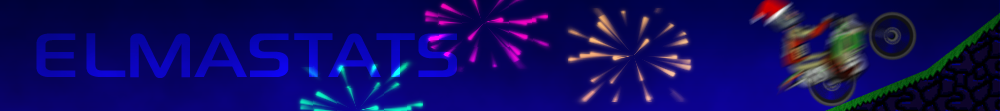
<style>
.page{position:relative;width:1000px;height:111px}
.page>*{position:absolute;margin:0}
.t1{font:89px "SonySketchEF"}
</style>
<div class="page">
<p class="t1" style="left:36px;top:33px;width:421px;height:45px">ELMASTATS</p>
</div>
